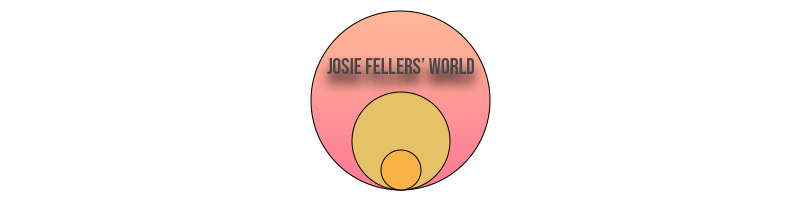
<style>
.page{position:relative;width:800px;height:200px;background:#ffffff}
.page>*{position:absolute;margin:0}
.t1{font:22px "BebasNeue-Regular";color:#474747}
</style>
<div class="page">
<p class="t1" style="left:327px;top:58px;width:147px;height:16px">Josie Fellers’ World</p>
</div>
